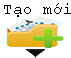
<style>
.page{position:relative;width:71px;height:58px;background:#ffffff}
.page>*{position:absolute;margin:0}
.t1{font:16px "CourierNewPSMT";color:#000000}
</style>
<div class="page">
<p class="t1" style="left:4px;top:3px;width:67px;height:14px">Tạo mới</p>
</div>
